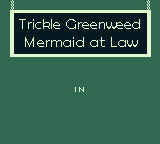
<style>
.page{position:relative;width:160px;height:144px;background:#306850}
.page>*{position:absolute;margin:0}
.t1{font:15px "BerlinSansFB-Reg";color:#e0f8cf;scale:1.08 1}
</style>
<div class="page">
<p class="t1" style="left:19px;top:19px;width:121px;height:28px;text-align:center">Trickle Greenweed<br>Mermaid at Law</p>
</div>
